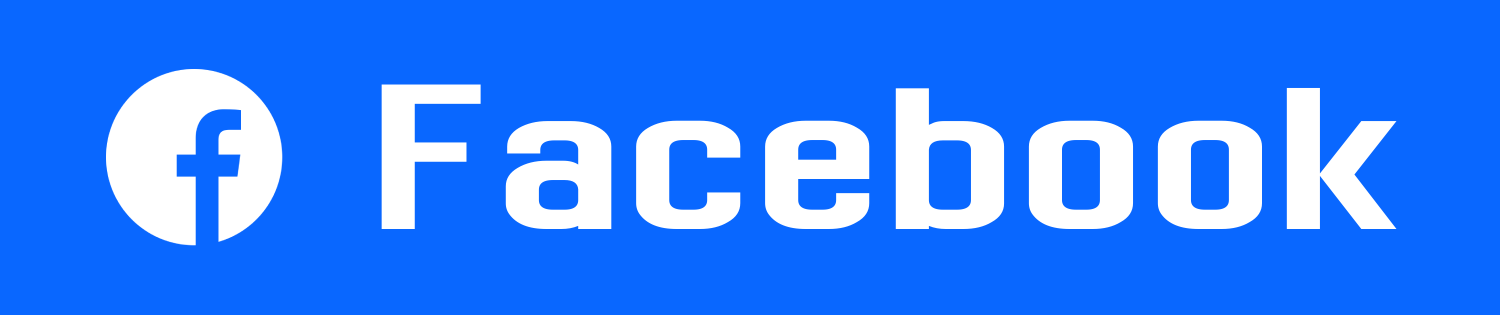
<style>
.page{position:relative;width:1500px;height:315px;background:#0967ff}
.page>*{position:absolute;margin:0}
.t1{font:300px "Dhurjati";color:#ffffff}
</style>
<div class="page">
<p class="t1" style="left:381px;top:84px;width:1016px;height:145px">Facebook</p>
</div>
